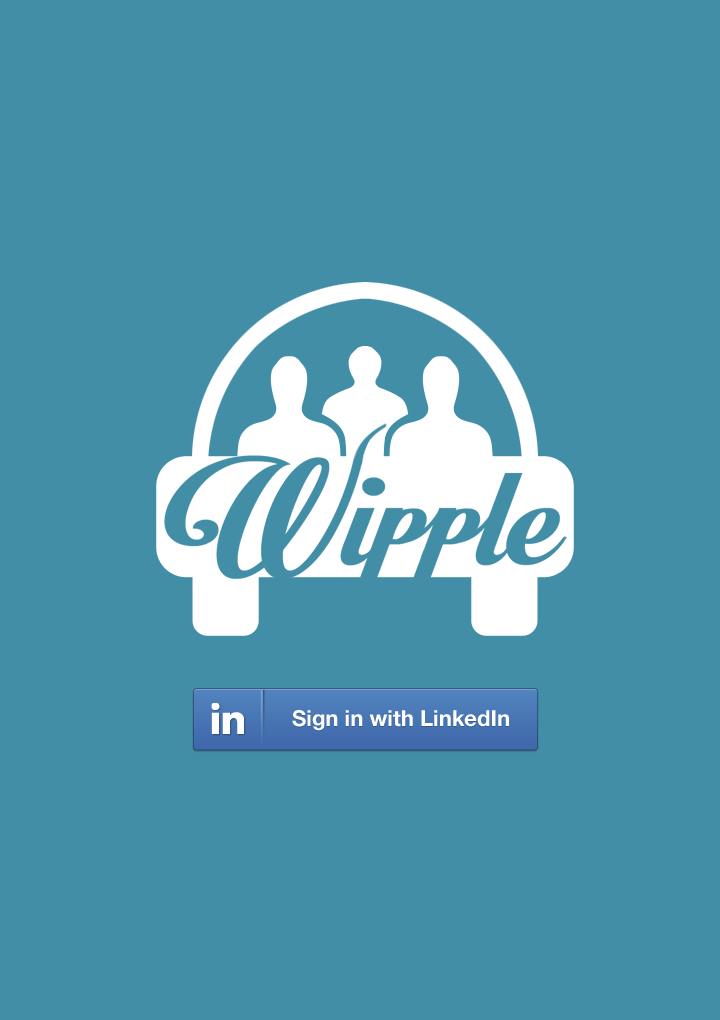
<style>
.page{position:relative;width:720px;height:1020px;background:#428ea7}
.page>*{position:absolute;margin:0}
.t1{font:22px "HelveticaNeue-Bold";color:#ffffff}
</style>
<div class="page">
<p class="t1" style="left:292px;top:710px;width:217px;height:21px">Sign in with LinkedIn</p>
</div>
